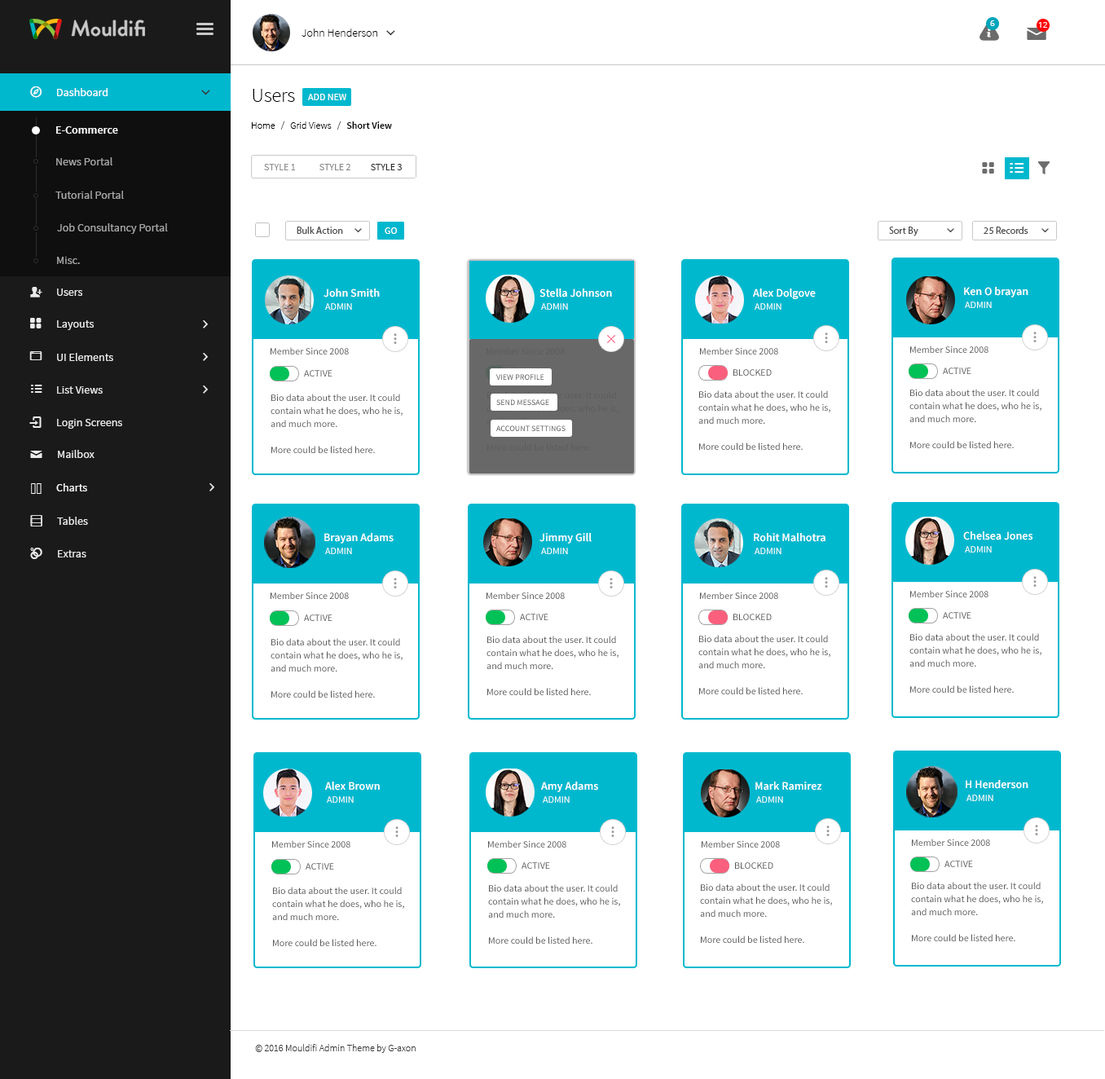
<style>
.page{position:relative;width:1105px;height:1079px;background:#ffffff}
.page>*{position:absolute;margin:0}
.t1{font:11.4px "SourceSansPro-Light";color:#000000}
.t2{font:8.1px "OpenSans";color:#ffffff}
.t3{font:11.4px "SourceSansPro-Regular";color:#ffffff}
.t4{font:11.4px "SourceSansPro-Regular";color:#ffffff;font-variant:small-caps}
.t5{font:19.6px "SourceSansPro-Light";color:#000000}
.t6{font:9.8px "SourceSansPro-Regular";color:#ffffff;text-transform:uppercase}
.t7{font:9.8px "SourceSansPro-Light";color:#000000}
.t8{font:9.8px "SourceSansPro-Semibold";color:#000000}
.t9{font:11.4px "SourceSansPro-Semibold";color:#ffffff}
.t10{font:11.4px "SourceSansPro-Regular";color:#a6a5a5}
.t11{font:9.8px "SourceSansPro-Regular";color:#8f8f8f;text-transform:uppercase}
.t12{font:9.8px "SourceSansPro-Regular";color:#8a8a8a;text-transform:uppercase}
.t13{font:9.8px "SourceSansPro-Regular";color:#2b2b2b;text-transform:uppercase}
.t14{font:11.1px "SourceSansPro-Regular";color:#a6a5a5}
.t15{font:9.8px "MyriadPro-Regular";color:#4e4e4e}
.t16{font:11.4px "SourceSansPro-Regular";color:#ebebeb}
.t17{font:9.8px "SourceSansPro-Regular";color:#565555}
.t18{font:9.8px "SourceSansPro-Regular";text-transform:uppercase}
.t19{font:8.1px "SourceSansPro-Regular";color:#505050;text-transform:uppercase}
.t20{font:9.8px "SourceSansPro-Regular";color:#565555;text-transform:uppercase}
.t21{font:9.8px/13px "SourceSansPro-Regular";color:#565555}
.t22{font:8.1px "SourceSansPro-Regular";text-transform:uppercase}
.t23{font:11.1px "SourceSansPro-Regular";color:#ebebeb}
.t24{font:9.8px "SourceSansPro-Light";color:#3e3e3e}
</style>
<div class="page">
<p class="t1" style="left:302px;top:29px;width:75px;height:8px">John Henderson</p>
<p class="t2" style="left:990px;top:20px;width:5px;height:6px">6</p>
<p class="t2" style="left:1038px;top:22px;width:9px;height:6px">12</p>
<p class="t3" style="left:57px;top:88px;width:51px;height:8px"><span class="t4">D</span>ashboard</p>
<p class="t5" style="left:253px;top:89px;width:42px;height:13px">Users</p>
<p class="t6" style="left:307px;top:94px;width:39px;height:6px">add new</p>
<p class="t7" style="left:252px;top:121px;width:140px;height:9px">Home   /   Grid Views   /  <span class="t8"> Short View</span></p>
<p class="t9" style="left:56px;top:126px;width:62px;height:8px">E-Commerce</p>
<p class="t10" style="left:56px;top:157px;width:56px;height:8px">News Portal</p>
<p class="t11" style="left:264px;top:164px;width:138px;height:6px">Style 1            <span class="t12">Style 2          </span><span class="t13">Style 3</span></p>
<p class="t14" style="left:55px;top:191px;width:69px;height:8px">Tutorial Portal</p>
<p class="t14" style="left:57px;top:223px;width:111px;height:11px">Job Consultancy Portal</p>
<p class="t15" style="left:297px;top:227px;width:46px;height:7px">Bulk Action</p>
<p class="t6" style="left:385px;top:227px;width:12px;height:7px">go</p>
<p class="t15" style="left:889px;top:227px;width:29px;height:9px">Sort By</p>
<p class="t15" style="left:984px;top:227px;width:44px;height:7px">25 Records</p>
<p class="t14" style="left:57px;top:257px;width:23px;height:7px">Misc.</p>
<p class="t16" style="left:57px;top:289px;width:25px;height:7px">Users</p>
<p class="t9" style="left:324px;top:289px;width:56px;height:8px">John Smith</p>
<p class="t9" style="left:540px;top:289px;width:72px;height:8px">Stella Johnson</p>
<p class="t9" style="left:753px;top:289px;width:63px;height:10px">Alex Dolgove</p>
<p class="t9" style="left:964px;top:287px;width:64px;height:10px">Ken O brayan</p>
<p class="t6" style="left:325px;top:303px;width:27px;height:7px">admin</p>
<p class="t6" style="left:541px;top:303px;width:27px;height:7px">admin</p>
<p class="t6" style="left:755px;top:303px;width:27px;height:7px">admin</p>
<p class="t6" style="left:965px;top:302px;width:27px;height:6px">admin</p>
<p class="t16" style="left:57px;top:320px;width:37px;height:10px">Layouts</p>
<p class="t16" style="left:57px;top:353px;width:56px;height:8px">UI Elements</p>
<p class="t17" style="left:271px;top:347px;width:78px;height:8px">Member Since 2008</p>
<p class="t17" style="left:487px;top:347px;width:78px;height:8px">Member Since 2008</p>
<p class="t17" style="left:700px;top:347px;width:78px;height:8px">Member Since 2008</p>
<p class="t17" style="left:910px;top:346px;width:79px;height:7px">Member Since 2008</p>
<p class="t18" style="left:304px;top:370px;width:29px;height:7px">active</p>
<p class="t19" style="left:496px;top:374px;width:48px;height:6px">View Profile</p>
<p class="t20" style="left:733px;top:369px;width:39px;height:7px">blocked</p>
<p class="t18" style="left:943px;top:368px;width:28px;height:6px">active</p>
<p class="t16" style="left:57px;top:386px;width:46px;height:8px">List Views</p>
<p class="t21" style="left:910px;top:389px;width:132px;height:59px">Bio data about the user. It could<br>contain what he does, who he is,<br>and much more.<br><br>More could be listed here.</p>
<p class="t21" style="left:271px;top:394px;width:132px;height:59px">Bio data about the user. It could<br>contain what he does, who he is,<br>and much more.<br><br>More could be listed here.</p>
<p class="t22" style="left:496px;top:399px;width:53px;height:6px">SEND MESSAGE</p>
<p class="t21" style="left:698px;top:390px;width:132px;height:60px">Bio data about the user. It could<br>contain what he does, who he is,<br>and much more.<br><br>More could be listed here.</p>
<p class="t16" style="left:57px;top:419px;width:65px;height:10px">Login Screens</p>
<p class="t19" style="left:496px;top:425px;width:70px;height:6px">account settings</p>
<p class="t16" style="left:58px;top:450px;width:37px;height:8px">Mailbox</p>
<p class="t3" style="left:56px;top:483px;width:31px;height:8px">Charts</p>
<p class="t23" style="left:57px;top:517px;width:31px;height:8px">Tables</p>
<p class="t9" style="left:324px;top:533px;width:70px;height:11px">Brayan Adams</p>
<p class="t9" style="left:540px;top:533px;width:52px;height:11px">Jimmy Gill</p>
<p class="t9" style="left:754px;top:533px;width:72px;height:9px">Rohit Malhotra</p>
<p class="t9" style="left:963px;top:531px;width:70px;height:9px">Chelsea Jones</p>
<p class="t23" style="left:58px;top:550px;width:28px;height:7px">Extras</p>
<p class="t6" style="left:325px;top:548px;width:27px;height:6px">admin</p>
<p class="t6" style="left:541px;top:548px;width:27px;height:6px">admin</p>
<p class="t6" style="left:755px;top:548px;width:27px;height:6px">admin</p>
<p class="t6" style="left:965px;top:546px;width:27px;height:7px">admin</p>
<p class="t17" style="left:271px;top:592px;width:78px;height:7px">Member Since 2008</p>
<p class="t17" style="left:487px;top:592px;width:78px;height:7px">Member Since 2008</p>
<p class="t17" style="left:700px;top:592px;width:78px;height:7px">Member Since 2008</p>
<p class="t17" style="left:910px;top:590px;width:79px;height:7px">Member Since 2008</p>
<p class="t18" style="left:304px;top:614px;width:29px;height:7px">active</p>
<p class="t18" style="left:520px;top:614px;width:28px;height:6px">active</p>
<p class="t20" style="left:733px;top:614px;width:39px;height:6px">blocked</p>
<p class="t18" style="left:943px;top:612px;width:28px;height:7px">active</p>
<p class="t21" style="left:271px;top:638px;width:132px;height:60px">Bio data about the user. It could<br>contain what he does, who he is,<br>and much more.<br><br>More could be listed here.</p>
<p class="t21" style="left:487px;top:636px;width:132px;height:59px">Bio data about the user. It could<br>contain what he does, who he is,<br>and much more.<br><br>More could be listed here.</p>
<p class="t21" style="left:698px;top:635px;width:132px;height:59px">Bio data about the user. It could<br>contain what he does, who he is,<br>and much more.<br><br>More could be listed here.</p>
<p class="t21" style="left:910px;top:633px;width:132px;height:60px">Bio data about the user. It could<br>contain what he does, who he is,<br>and much more.<br><br>More could be listed here.</p>
<p class="t9" style="left:325px;top:782px;width:55px;height:9px">Alex Brown</p>
<p class="t9" style="left:541px;top:782px;width:57px;height:10px">Amy Adams</p>
<p class="t9" style="left:755px;top:782px;width:66px;height:9px">Mark Ramirez</p>
<p class="t9" style="left:966px;top:780px;width:62px;height:9px">H Henderson</p>
<p class="t6" style="left:327px;top:796px;width:27px;height:7px">admin</p>
<p class="t6" style="left:543px;top:796px;width:27px;height:7px">admin</p>
<p class="t6" style="left:756px;top:796px;width:27px;height:7px">admin</p>
<p class="t6" style="left:967px;top:795px;width:26px;height:6px">admin</p>
<p class="t17" style="left:272px;top:840px;width:78px;height:8px">Member Since 2008</p>
<p class="t17" style="left:488px;top:840px;width:78px;height:8px">Member Since 2008</p>
<p class="t17" style="left:702px;top:840px;width:78px;height:8px">Member Since 2008</p>
<p class="t17" style="left:912px;top:839px;width:78px;height:7px">Member Since 2008</p>
<p class="t18" style="left:306px;top:863px;width:28px;height:7px">active</p>
<p class="t18" style="left:522px;top:862px;width:28px;height:7px">active</p>
<p class="t20" style="left:735px;top:862px;width:38px;height:7px">blocked</p>
<p class="t18" style="left:945px;top:861px;width:28px;height:6px">active</p>
<p class="t21" style="left:911px;top:882px;width:132px;height:59px">Bio data about the user. It could<br>contain what he does, who he is,<br>and much more.<br><br>More could be listed here.</p>
<p class="t21" style="left:272px;top:887px;width:132px;height:59px">Bio data about the user. It could<br>contain what he does, who he is,<br>and much more.<br><br>More could be listed here.</p>
<p class="t21" style="left:488px;top:884px;width:132px;height:60px">Bio data about the user. It could<br>contain what he does, who he is,<br>and much more.<br><br>More could be listed here.</p>
<p class="t21" style="left:700px;top:883px;width:132px;height:60px">Bio data about the user. It could<br>contain what he does, who he is,<br>and much more.<br><br>More could be listed here.</p>
<p class="t24" style="left:255px;top:1044px;width:161px;height:9px">© 2016 Mouldifi Admin Theme by G-axon</p>
</div>
